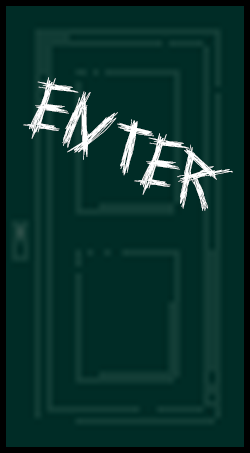
<style>
.page{position:relative;width:250px;height:453px;background:#002c26}
.page>*{position:absolute;margin:0}
.t1{font:62.5px "HelpMe";color:#ffffff}
</style>
<div class="page">
<p class="t1" style="left:23px;top:77px;width:210px;height:134px;rotate:27deg">ENter</p>
</div>
